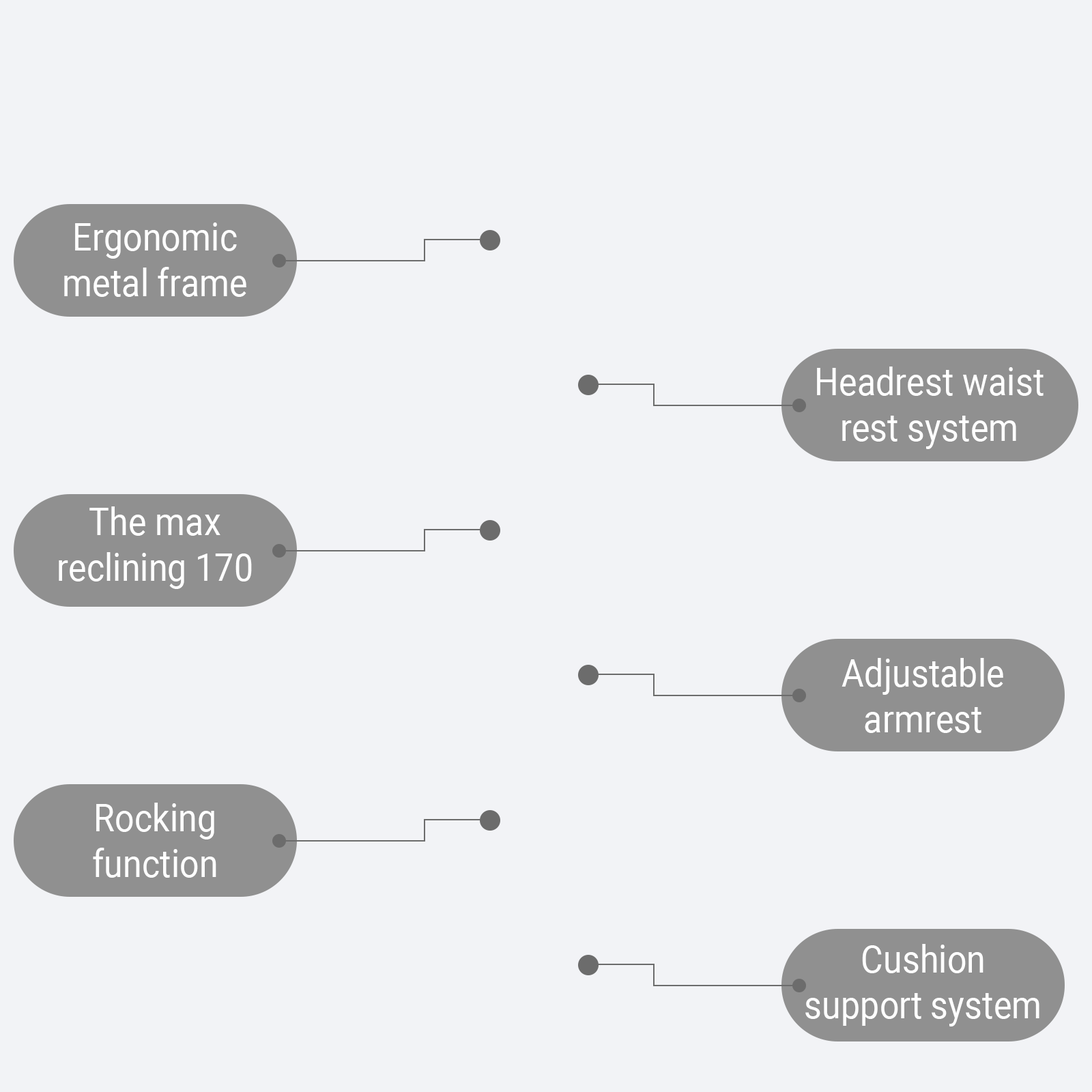
<style>
.page{position:relative;width:1092px;height:1092px;background:#f2f3f6}
.page>*{position:absolute;margin:0}
.t1{font:38.2px "Roboto-Regular";color:#ffffff;scale:0.9 1}
</style>
<div class="page">
<p class="t1" style="left:64px;top:222px;width:182px;height:75px;text-align:center">Ergonomic<br>metal frame</p>
<p class="t1" style="left:817px;top:366px;width:227px;height:83px;text-align:center">Headrest waist<br>rest system</p>
<p class="t1" style="left:59px;top:506px;width:193px;height:83px;text-align:center">The max<br>reclining 170</p>
<p class="t1" style="left:842px;top:658px;width:161px;height:75px;text-align:center">Adjustable<br>armrest</p>
<p class="t1" style="left:93px;top:803px;width:123px;height:75px;text-align:center">Rocking<br>function</p>
<p class="t1" style="left:805px;top:944px;width:234px;height:82px;text-align:center">Cushion<br>support system</p>
</div>
